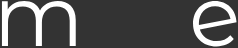
<style>
.page{position:relative;width:238px;height:48px;background:#333333}
.page>*{position:absolute;margin:0}
.t1{font:85px "MontserratAlternates-Regular";letter-spacing:1.238em;color:#ffffff}
</style>
<div class="page">
<p class="t1" style="left:1px;top:0px;width:236px;height:47px">me</p>
</div>
